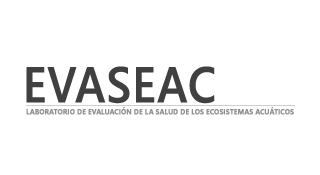
<style>
.page{position:relative;width:320px;height:175px;background:#ffffff}
.page>*{position:absolute;margin:0}
.t1{font:50px "SegoeWP-Semibold";color:#404040;font-weight:bold;scale:0.9 1}
.t2{font:7.5px "SegoeUI-Bold";color:#919191;font-weight:bold;scale:0.9 1}
</style>
<div class="page">
<p class="t1" style="left:26px;top:66px;width:189px;height:38px">EVASEAC</p>
<p class="t2" style="left:26px;top:107px;width:268px;height:8px">LABORATORIO DE EVALUACIÓN DE LA SALUD DE LOS ECOSISTEMAS ACUÁTICOS</p>
</div>
